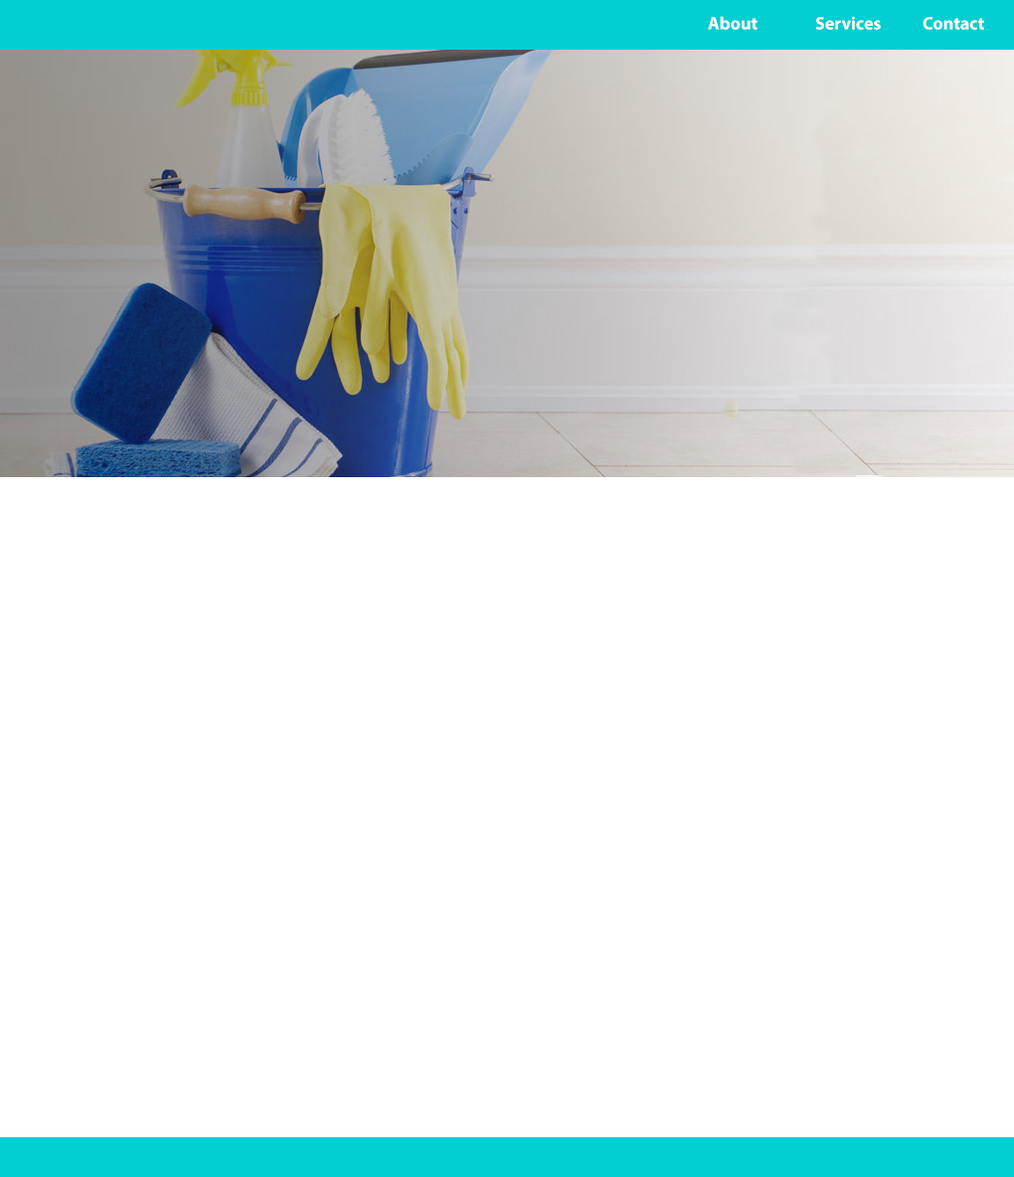
<style>
.page{position:relative;width:1014px;height:1177px;background:#ffffff}
.page>*{position:absolute;margin:0}
.t1{font:17.9px "MyriadPro-Bold";color:#ffffff}
</style>
<div class="page">
<p class="t1" style="left:707px;top:16px;width:277px;height:14px">About  Services  Contact</p>
</div>
